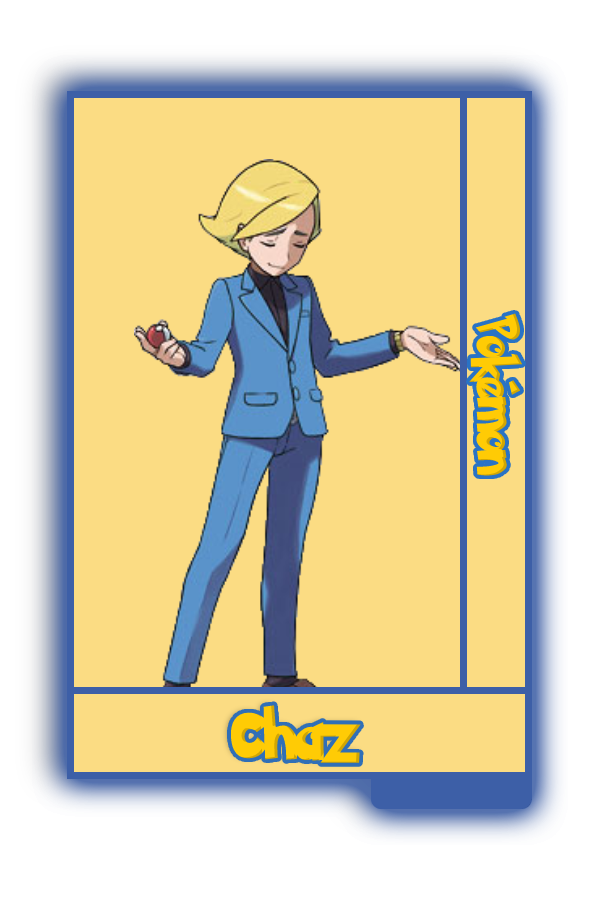
<style>
.page{position:relative;width:600px;height:900px;background:#fbdc83}
.page>*{position:absolute;margin:0}
.t1{font:48.8px "PokemonSolidNormal";color:#ffcb05;scale:0.8 1}
.t2{font:56.6px "PokemonSolidNormal";color:#ffcb05;scale:0.92 1}
</style>
<div class="page">
<p class="t1" style="left:469px;top:313px;width:54px;height:163px;rotate:90deg">Pokémon</p>
<p class="t2" style="left:230px;top:705px;width:131px;height:58px">Chaz</p>
</div>
